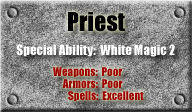
<style>
.page{position:relative;width:192px;height:112px}
.page>*{position:absolute;margin:0}
.t1{font:24px "Impact";color:#000000}
.t2{font:13px "Impact";color:#ffffff}
.t3{font:11px "Impact";color:#9c0000}
</style>
<div class="page">
<p class="t1" style="left:68px;top:12px;width:57px;height:20px">Priest</p>
<p class="t2" style="left:16px;top:44px;width:159px;height:13px">Special Ability:  White Magic 2</p>
<p class="t3" style="left:53px;top:67px;width:69px;height:10px">Weapons:  Poor</p>
<p class="t3" style="left:62px;top:79px;width:61px;height:9px">Armors:  Poor</p>
<p class="t3" style="left:68px;top:91px;width:76px;height:10px">Spells:  Excellent</p>
</div>
